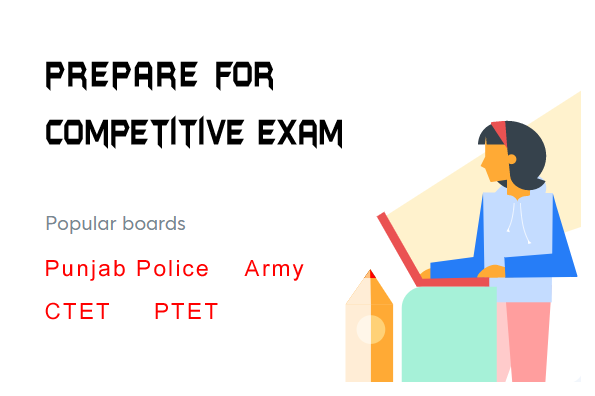
<style>
.page{position:relative;width:595px;height:396px;background:#ffffff}
.page>*{position:absolute;margin:0}
.t1{font:42.5px/59px "BatmanForeverAlternate";color:#000000;scale:0.57 1}
.t2{font:42.5px/59px "BatmanForeverAlternate";letter-spacing:0.08em;color:#000000;scale:0.57 1}
.t3{font:22.5px/42.7px "ArialNarrow";letter-spacing:0.08em;color:#ff0000;scale:1.22 1}
</style>
<div class="page">
<p class="t1" style="left:46px;top:61px;width:296px;height:88px"><span class="t2">prepare </span>for<br>competitive exam</p>
<p class="t3" style="left:45px;top:260px;width:259px;height:60px">Punjab Police    Army<br>CTET     PTET</p>
</div>
